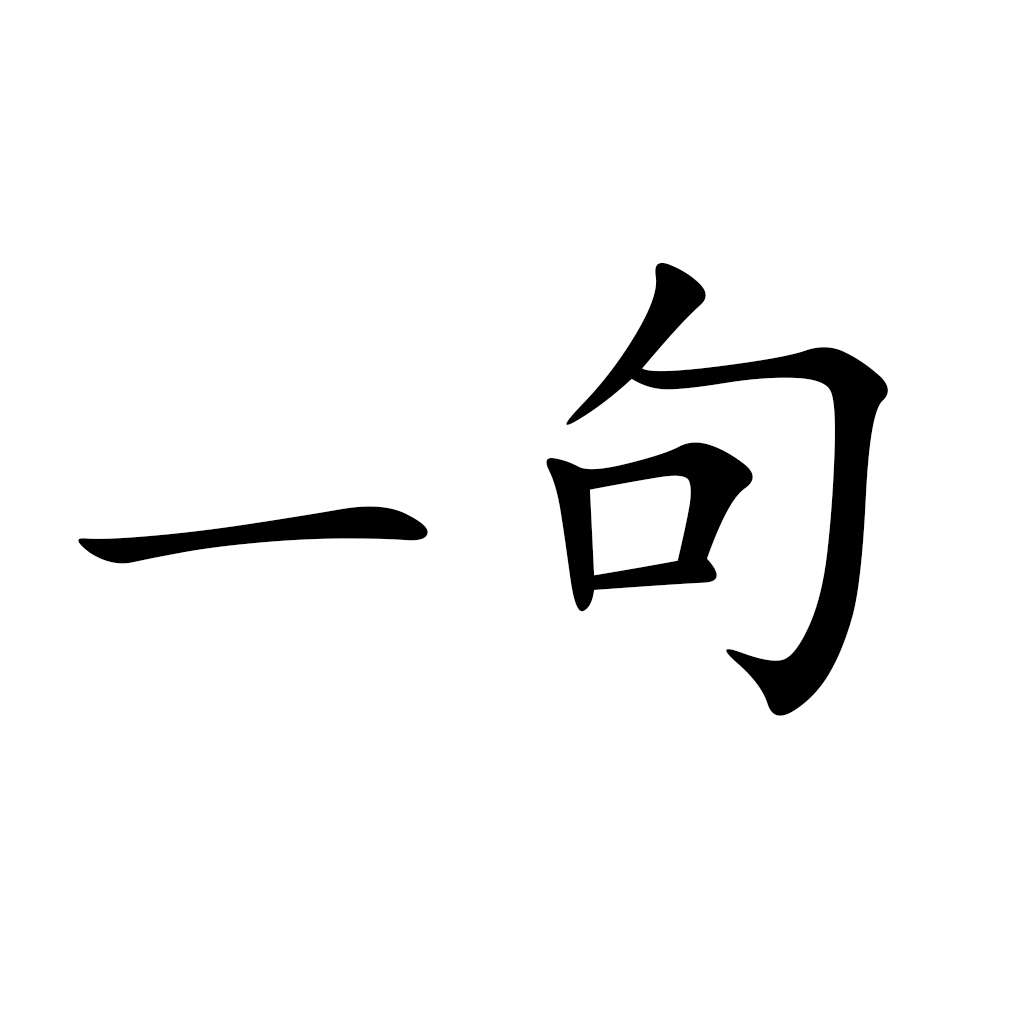
<style>
.page{position:relative;width:1024px;height:1024px;background:#ffffff}
.page>*{position:absolute;margin:0}
.t1{font:405px "KaiTi";color:#000000}
.t2{font:535px "KaiTi";color:#000000}
</style>
<div class="page">
<p class="t1" style="left:78px;top:262px;width:810px;height:454px">一<span class="t2">句</span></p>
</div>
